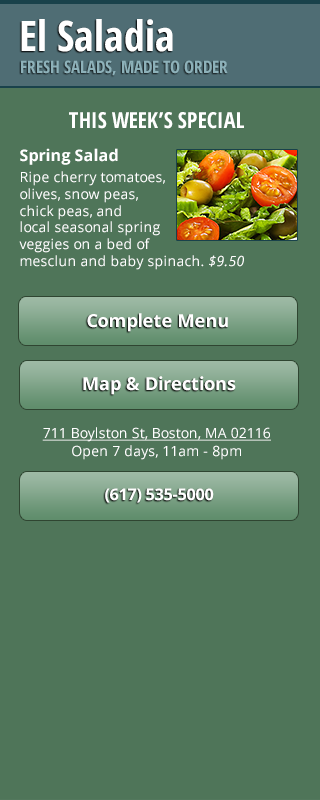
<style>
.page{position:relative;width:320px;height:800px;background:#4f7559}
.page>*{position:absolute;margin:0}
.t1{font:42px "OpenSans-CondensedBold";color:#ffffff}
.t2{font:17px "OpenSans-CondensedBold";color:#8db1b9;text-transform:uppercase}
.t3{font:22px "OpenSans-CondensedBold";color:#ffffff}
.t4{font:14px "OpenSans";color:#ffffff}
.t5{font:16px "OpenSans-Bold";color:#ffffff}
.t6{font:14px "OpenSans-Italic";color:#ffffff}
.t7{font:18px "OpenSans-Bold";color:#ffffff}
.t8{font:14px/18px "OpenSans";color:#ffffff;text-decoration:underline}
.t9{font:14px/18px "OpenSans";color:#ffffff}
</style>
<div class="page">
<p class="t1" style="left:21px;top:19px;width:152px;height:33px">El Saladia</p>
<p class="t2" style="left:21px;top:60px;width:207px;height:16px">Fresh Salads, Made To Order</p>
<p class="t3" style="left:69px;top:112px;width:175px;height:17px">THIS WEEK’S SPECIAL</p>
<p class="t4" style="left:19px;top:148px;width:225px;height:122px"><span class="t5">Spring Salad<br></span>Ripe cherry tomatoes, <br>olives, snow peas, <br>chick peas, and <br>local seasonal spring<br>veggies on a bed of <br>mesclun and baby spinach. <span class="t6">$9.50</span></p>
<p class="t7" style="left:87px;top:313px;width:141px;height:19px">Complete Menu</p>
<p class="t7" style="left:83px;top:376px;width:153px;height:19px">Map &amp; Directions</p>
<p class="t8" style="left:42px;top:427px;width:229px;height:33px;text-align:center">711 Boylston St, Boston, MA 02116<br><span class="t9">Open 7 days, 11am - 8pm</span></p>
<p class="t5" style="left:105px;top:488px;width:109px;height:15px">(617) 535-5000</p>
</div>
